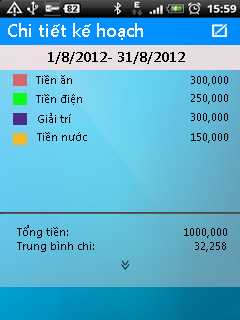
<style>
.page{position:relative;width:240px;height:320px}
.page>*{position:absolute;margin:0}
.t1{font:18.3px "SegoeUI-SemiBold";color:#ffffff}
.t2{font:13.8px "SegoeUI-SemiBold";color:#000000}
.t3{font:11.5px "SegoeUI";color:#000000}
</style>
<div class="page">
<p class="t1" style="left:8px;top:23px;width:135px;height:17px">Chi tiết kế hoạch</p>
<p class="t2" style="left:48px;top:52px;width:137px;height:12px">1/8/2012- 31/8/2012</p>
<p class="t3" style="left:36px;top:75px;width:36px;height:9px">Tiền ăn</p>
<p class="t3" style="left:191px;top:76px;width:37px;height:10px">300,000</p>
<p class="t3" style="left:36px;top:94px;width:46px;height:11px">Tiền điện</p>
<p class="t3" style="left:191px;top:94px;width:37px;height:10px">250,000</p>
<p class="t3" style="left:38px;top:113px;width:33px;height:10px">Giải trí</p>
<p class="t3" style="left:191px;top:113px;width:37px;height:10px">300,000</p>
<p class="t3" style="left:37px;top:132px;width:50px;height:9px">Tiền nước</p>
<p class="t3" style="left:191px;top:133px;width:37px;height:10px">150,000</p>
<p class="t3" style="left:17px;top:225px;width:210px;height:27px">Tổng tiền:                                      1000,000<br>Trung bình chi:                                 32,258</p>
</div>
